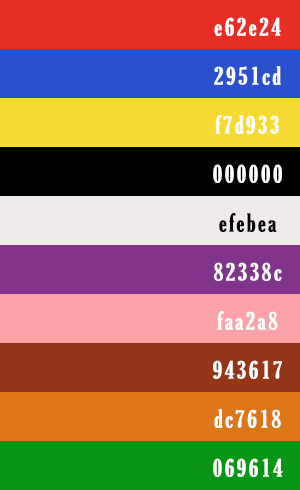
<style>
.page{position:relative;width:300px;height:490px}
.page>*{position:absolute;margin:0}
.t1{font:24px/49px "GloucesterMT-ExtraCondensed";letter-spacing:0.09em;color:#ffffff;font-weight:bold}
.t2{font:24px/49px "GloucesterMT-ExtraCondensed";letter-spacing:0.09em;color:#000000;font-weight:bold}
</style>
<div class="page">
<p class="t1" style="left:213px;top:17px;width:70px;height:460px;text-align:center">e62e24<br>2951cd<br>f7d933<br>000000<br><span class="t2">efebea<br></span>82338c<br>faa2a8<br>943617<br>dc7618<br>069614</p>
</div>
